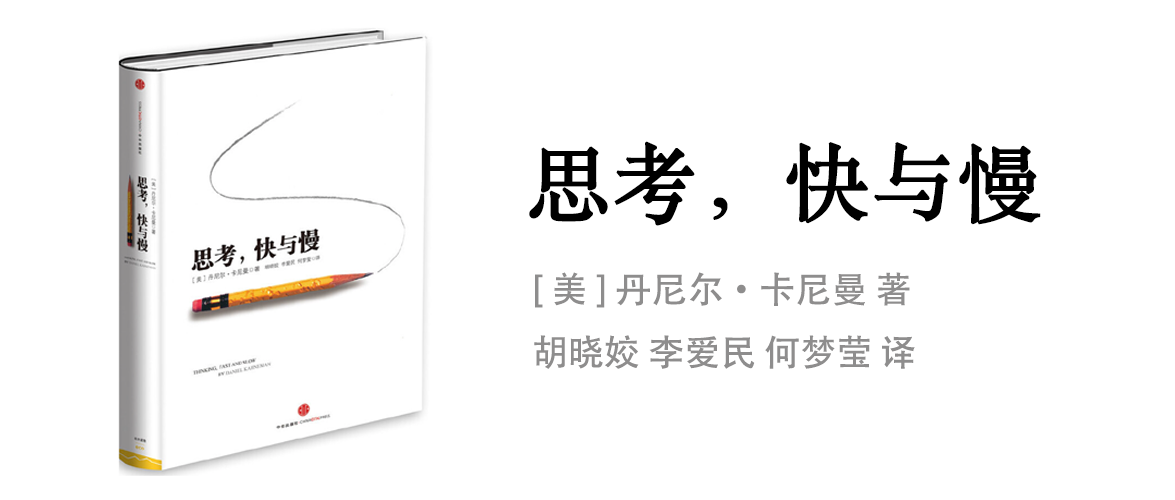
<style>
.page{position:relative;width:1175px;height:500px;background:#ffffff}
.page>*{position:absolute;margin:0}
.t1{font:84px "STSongti-SC-Regular";color:#000000;font-weight:bold}
.t2{font:36px "AdobeHeitiStd-Regular";color:#8e8d8d}
</style>
<div class="page">
<p class="t1" style="left:529px;top:141px;width:512px;height:85px">思考，快与慢</p>
<p class="t2" style="left:534px;top:272px;width:381px;height:97px">[ 美 ] 丹尼尔·卡尼曼 著<br>胡晓姣 李爱民 何梦莹 译</p>
</div>
